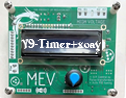
<style>
.page{position:relative;width:126px;height:98px}
.page>*{position:absolute;margin:0}
.t1{font:12px "VNI-Duff";color:#ffffff}
</style>
<div class="page">
<p class="t1" style="left:21px;top:39px;width:80px;height:15px">V9-Timer+xoay</p>
</div>
